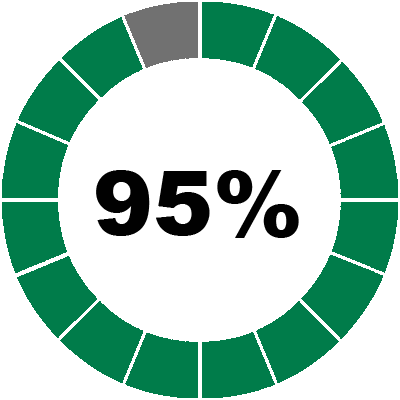
<style>
.page{position:relative;width:400px;height:400px;background:#ffffff}
.page>*{position:absolute;margin:0}
.t1{font:90px "Arial-Black";color:#010101}
</style>
<div class="page">
<p class="t1" style="left:96px;top:170px;width:203px;height:68px">95%</p>
</div>
